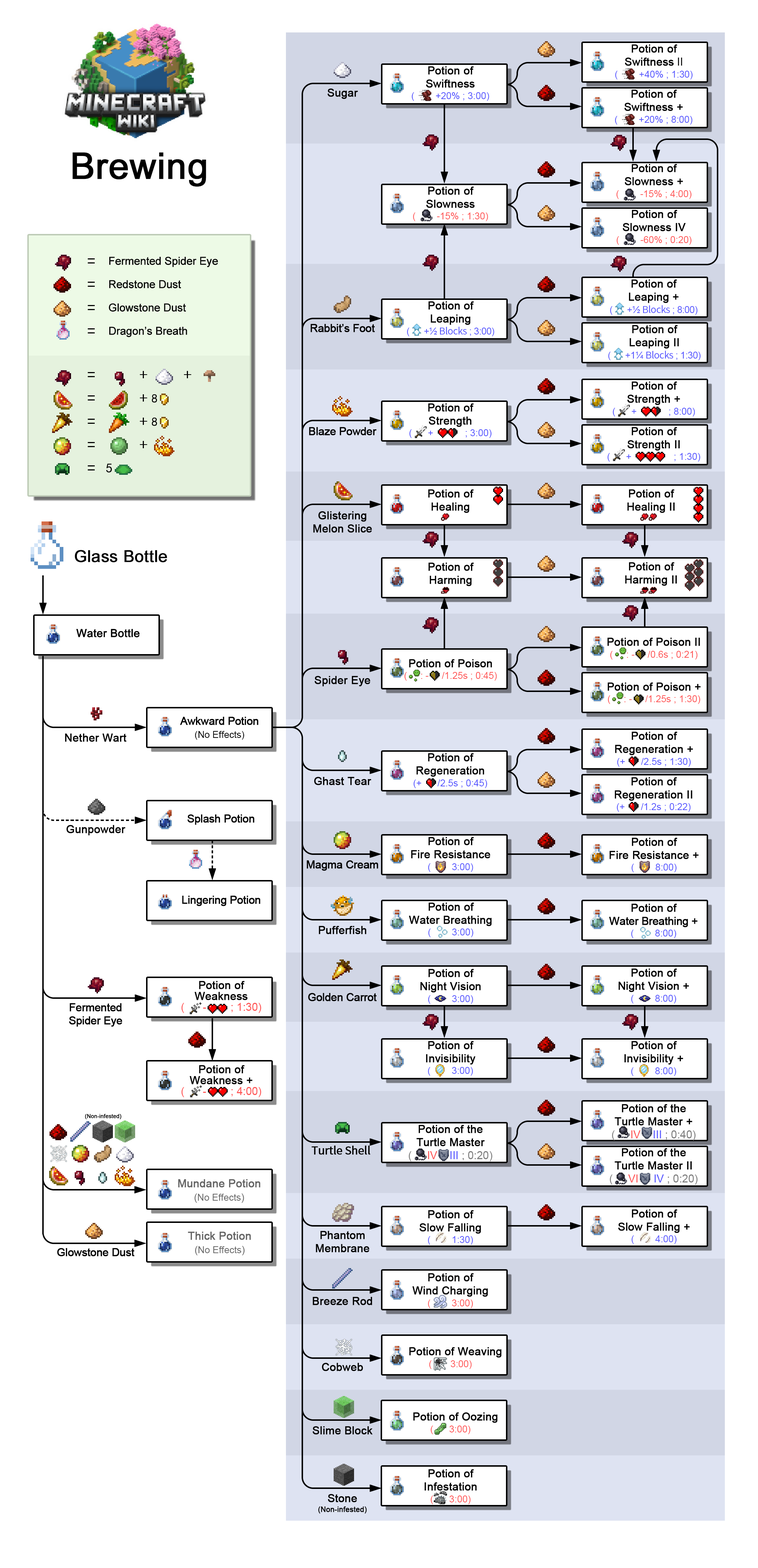
<style>
.page{position:relative;width:758px;height:1568px;background:#ffffff}
.page>*{position:absolute;margin:0}
.t1{font:9.5px/13.1px "ArialMT";color:#5555ff}
.t2{font:10.9px/13.1px "ArialMT";color:#000000;font-weight:bold}
.t3{font:10.9px/13.1px "ArialMT";color:#000000}
.t4{font:10.9px "ArialMT";color:#000000;font-weight:bold}
.t5{font:36.4px "ArialMT";color:#000000;font-weight:bold}
.t6{font:9.5px/13.1px "ArialMT";color:#ff5555}
.t7{font:10.9px/23.3px "ArialMT";letter-spacing:-0.025em;color:#000000;font-weight:bold}
.t8{font:9.5px/13.1px "ArialMT";letter-spacing:-0.025em;color:#5555ff}
.t9{font:9.5px/13.1px "SourceHanSansHC-Regular";letter-spacing:-0.025em;color:#5555ff}
.t10{font:10.9px "ArialMT";letter-spacing:-0.025em;color:#000000;font-weight:bold}
.t11{font:16.4px "ArialMT";color:#000000;font-weight:bold}
.t12{font:10.9px/14.2px "ArialMT";letter-spacing:-0.025em;color:#000000;font-weight:bold}
.t13{font:9.5px/14.2px "ArialMT";color:#000000}
.t14{font:10.9px/13.1px "ArialMT";letter-spacing:-0.025em;color:#000000;font-weight:bold}
.t15{font:10.9px/10.9px "ArialMT";color:#ff5555}
.t16{font:10.9px/10.9px "ArialMT";color:#000000;font-weight:bold}
.t17{font:10.9px/13.1px "ArialMT";color:#7d7d7d}
.t18{font:10.9px/13.1px "ArialMT";color:#ff5555}
.t19{font:10.9px/13.1px "ArialMT";color:#5555ff}
.t20{font:5.5px "ArialMT";color:#000000;font-weight:bold}
.t21{font:10.9px "SourceHanSansHC-Regular";letter-spacing:-0.025em;color:#000000;font-weight:bold}
.t22{font:10.9px/14.2px "ArialMT";color:#666666;font-weight:bold}
.t23{font:10.1px/14.2px "ArialMT";color:#666666}
.t24{font:9.5px/14.2px "ArialMT";color:#666666}
.t25{font:7.3px/13.1px "ArialMT";color:#000000;font-weight:bold}
</style>
<div class="page">
<p class="t1" style="left:615px;top:44px;width:78px;height:35px;text-align:center"><span class="t2">Potion of<br>Swiftness</span><span class="t3"> II<br></span>(        +40% ; 1:30)</p>
<p class="t1" style="left:412px;top:66px;width:77px;height:35px;text-align:center"><span class="t2">Potion of<br>Swiftness<br></span>(        +20% ; 3:00)</p>
<p class="t4" style="left:328px;top:89px;width:30px;height:10px">Sugar</p>
<p class="t2" style="left:615px;top:90px;width:78px;height:35px;text-align:center">Potion of<br>Swiftness +<br><span class="t1">(        +20% ; 8:00)</span></p>
<p class="t5" style="left:73px;top:152px;width:133px;height:35px">Brewing</p>
<p class="t6" style="left:617px;top:164px;width:75px;height:35px;text-align:center"><span class="t2">Potion of<br>Slowness +<br></span>(        -15% ; 4:00)</p>
<p class="t6" style="left:413px;top:187px;width:75px;height:34px;text-align:center"><span class="t2">Potion of<br>Slowness<br></span>(        -15% ; 1:30)</p>
<p class="t2" style="left:617px;top:210px;width:75px;height:35px;text-align:center">Potion of<br>Slowness IV<br><span class="t6">(        -60% ; 0:20)</span></p>
<p class="t7" style="left:109px;top:257px;width:109px;height:80px">Fermented Spider Eye<br>Redstone Dust<br>Glowstone Dust<br>Dragon’s Breath</p>
<p class="t2" style="left:610px;top:279px;width:88px;height:36px;text-align:center">Potion of<br>Leaping +<br><span class="t8">(      +½ </span><span class="t9">Blocks</span><span class="t8"> ; 8:00)</span></p>
<p class="t2" style="left:407px;top:301px;width:87px;height:35px;text-align:center">Potion of<br>Leaping<br><span class="t8">(      +½ </span><span class="t9">Blocks</span><span class="t8"> ; 3:00)</span></p>
<p class="t10" style="left:311px;top:324px;width:64px;height:8px">Rabbit’s Foot</p>
<p class="t2" style="left:609px;top:325px;width:92px;height:35px;text-align:center">Potion of<br>Leaping II<br><span class="t8">(      +1¼ </span><span class="t9">Blocks</span><span class="t8"> ; 1:30)</span></p>
<p class="t1" style="left:613px;top:382px;width:82px;height:35px;text-align:center"><span class="t2">Potion of<br>Strength +<br></span>(      +            ; 8:00)</p>
<p class="t1" style="left:410px;top:403px;width:82px;height:35px;text-align:center"><span class="t2">Potion of<br>Strength<br></span>(      +            ; 3:00)</p>
<p class="t10" style="left:309px;top:427px;width:68px;height:8px">Blaze Powder</p>
<p class="t1" style="left:608px;top:427px;width:93px;height:35px;text-align:center"><span class="t2">Potion of<br>Strength II<br></span>(      +                ; 1:30)</p>
<p class="t2" style="left:428px;top:489px;width:46px;height:24px;text-align:center">Potion of<br>Healing</p>
<p class="t2" style="left:627px;top:489px;width:48px;height:24px;text-align:center">Potion of<br>Healing II</p>
<p class="t2" style="left:313px;top:511px;width:59px;height:22px;text-align:center">Glistering<br>Melon Slice</p>
<p class="t11" style="left:75px;top:550px;width:92px;height:12px">Glass Bottle</p>
<p class="t2" style="left:429px;top:563px;width:45px;height:23px;text-align:center">Potion of<br>Harming</p>
<p class="t2" style="left:625px;top:562px;width:52px;height:24px;text-align:center">Potion of<br>Harming II</p>
<p class="t4" style="left:76px;top:629px;width:64px;height:8px">Water Bottle</p>
<p class="t6" style="left:607px;top:638px;width:93px;height:22px;text-align:center"><span class="t2">Potion of Poison II<br></span>(     : -     /0.6s ; 0:21)</p>
<p class="t6" style="left:404px;top:659px;width:93px;height:22px;text-align:center"><span class="t2">Potion of Poison<br></span>(     : -     /1.25s ; 0:45)</p>
<p class="t4" style="left:314px;top:676px;width:57px;height:11px">Spider Eye</p>
<p class="t6" style="left:608px;top:683px;width:93px;height:21px;text-align:center"><span class="t2">Potion of Poison +<br></span>(     : -     /1.25s ; 1:30)</p>
<p class="t12" style="left:180px;top:717px;width:78px;height:23px;text-align:center">Awkward Potion<br><span class="t13">(No Effects)</span></p>
<p class="t4" style="left:65px;top:734px;width:61px;height:8px">Nether Wart</p>
<p class="t2" style="left:615px;top:732px;width:78px;height:35px;text-align:center">Potion of<br>Regeneration +<br><span class="t1">(+      /2.5s ; 1:30)</span></p>
<p class="t2" style="left:414px;top:753px;width:74px;height:35px;text-align:center">Potion of<br>Regeneration<br><span class="t1">(+      /2.5s ; 0:45)</span></p>
<p class="t4" style="left:314px;top:777px;width:58px;height:8px">Ghast Tear</p>
<p class="t2" style="left:615px;top:777px;width:78px;height:35px;text-align:center">Potion of<br>Regeneration II<br><span class="t1">(+      /1.2s ; 0:22)</span></p>
<p class="t10" style="left:187px;top:814px;width:67px;height:11px">Splash Potion</p>
<p class="t4" style="left:66px;top:825px;width:60px;height:11px">Gunpowder</p>
<p class="t2" style="left:411px;top:837px;width:79px;height:35px;text-align:center">Potion of<br>Fire Resistance<br><span class="t1">(        3:00)</span></p>
<p class="t2" style="left:610px;top:838px;width:89px;height:34px;text-align:center">Potion of<br>Fire Resistance +<br><span class="t1">(        8:00)</span></p>
<p class="t10" style="left:307px;top:860px;width:71px;height:11px">Magma Cream</p>
<p class="t10" style="left:182px;top:896px;width:79px;height:10px">Lingering Potion</p>
<p class="t2" style="left:409px;top:903px;width:83px;height:34px;text-align:center">Potion of<br>Water Breathing<br><span class="t1">(        3:00)</span></p>
<p class="t14" style="left:609px;top:904px;width:89px;height:34px;text-align:center"><span class="t2">Potion of<br></span>Water Breathing +<br><span class="t1">(        8:00)</span></p>
<p class="t4" style="left:319px;top:926px;width:48px;height:8px">Pufferfish</p>
<p class="t2" style="left:421px;top:969px;width:60px;height:35px;text-align:center">Potion of<br>Night Vision<br><span class="t1">(        3:00)</span></p>
<p class="t2" style="left:619px;top:969px;width:70px;height:35px;text-align:center">Potion of<br>Night Vision +<br><span class="t1">(        8:00)</span></p>
<p class="t15" style="left:181px;top:981px;width:80px;height:32px;text-align:center"><span class="t16">Potion of<br>Weakness<br></span>(      -        ; 1:30)</p>
<p class="t10" style="left:308px;top:993px;width:69px;height:8px">Golden Carrot</p>
<p class="t14" style="left:69px;top:1003px;width:53px;height:24px;text-align:center">Fermented<br>Spider Eye</p>
<p class="t2" style="left:426px;top:1041px;width:50px;height:35px;text-align:center">Potion of<br>Invisibility<br><span class="t1">(        3:00)</span></p>
<p class="t2" style="left:625px;top:1041px;width:59px;height:35px;text-align:center">Potion of<br>Invisibility +<br><span class="t1">(        8:00)</span></p>
<p class="t15" style="left:181px;top:1065px;width:80px;height:32px;text-align:center"><span class="t16">Potion of<br>Weakness +<br></span>(      -        ; 4:00)</p>
<p class="t2" style="left:612px;top:1104px;width:84px;height:37px;text-align:center">Potion of the<br>Turtle Master +<br><span class="t17">(</span><span class="t18">     IV</span><span class="t19">    III </span><span class="t17">; 0:40)</span></p>
<p class="t20" style="left:85px;top:1114px;width:36px;height:5px">(Non-infested)</p>
<p class="t2" style="left:409px;top:1125px;width:84px;height:36px;text-align:center">Potion of the<br>Turtle Master<br><span class="t17">(</span><span class="t18">     IV</span><span class="t19">    III </span><span class="t17">; 0:20)</span></p>
<p class="t21" style="left:312px;top:1145px;width:59px;height:10px">Turtle Shell</p>
<p class="t2" style="left:610px;top:1148px;width:88px;height:37px;text-align:center">Potion of the<br>Turtle Master II<br><span class="t17">(</span><span class="t18">     VI</span><span class="t19">     IV </span><span class="t17">; 0:20)</span></p>
<p class="t22" style="left:178px;top:1179px;width:83px;height:24px;text-align:center">Mundane Potion<br><span class="t23">(</span><span class="t24">No Effects</span><span class="t23">)</span></p>
<p class="t2" style="left:419px;top:1210px;width:62px;height:35px;text-align:center">Potion of<br>Slow Falling<br><span class="t1">(        1:30)</span></p>
<p class="t2" style="left:618px;top:1209px;width:72px;height:35px;text-align:center">Potion of<br>Slow Falling +<br><span class="t1">(        4:00)</span></p>
<p class="t22" style="left:188px;top:1232px;width:63px;height:23px;text-align:center">Thick Potion<br><span class="t23">(</span><span class="t24">No Effects</span><span class="t23">)</span></p>
<p class="t2" style="left:316px;top:1231px;width:53px;height:21px;text-align:center">Phantom<br>Membrane</p>
<p class="t10" style="left:57px;top:1248px;width:77px;height:8px">Glowstone Dust</p>
<p class="t2" style="left:412px;top:1273px;width:76px;height:35px;text-align:center">Potion of<br>Wind Charging<br><span class="t6">(        3:00)</span></p>
<p class="t4" style="left:313px;top:1297px;width:59px;height:8px">Breeze Rod</p>
<p class="t2" style="left:409px;top:1347px;width:93px;height:22px;text-align:center">Potion of Weaving<br><span class="t6">(       3:00)</span></p>
<p class="t4" style="left:322px;top:1363px;width:41px;height:8px">Cobweb</p>
<p class="t2" style="left:413px;top:1412px;width:85px;height:22px;text-align:center">Potion of Oozing<br><span class="t6">(      3:00)</span></p>
<p class="t4" style="left:313px;top:1426px;width:60px;height:9px">Slime Block</p>
<p class="t2" style="left:425px;top:1469px;width:52px;height:35px;text-align:center">Potion of<br>Infestation<br><span class="t6">(      3:00)</span></p>
<p class="t25" style="left:318px;top:1494px;width:49px;height:20px;text-align:center"><span class="t2">Stone<br></span>(Non-infested)</p>
</div>
